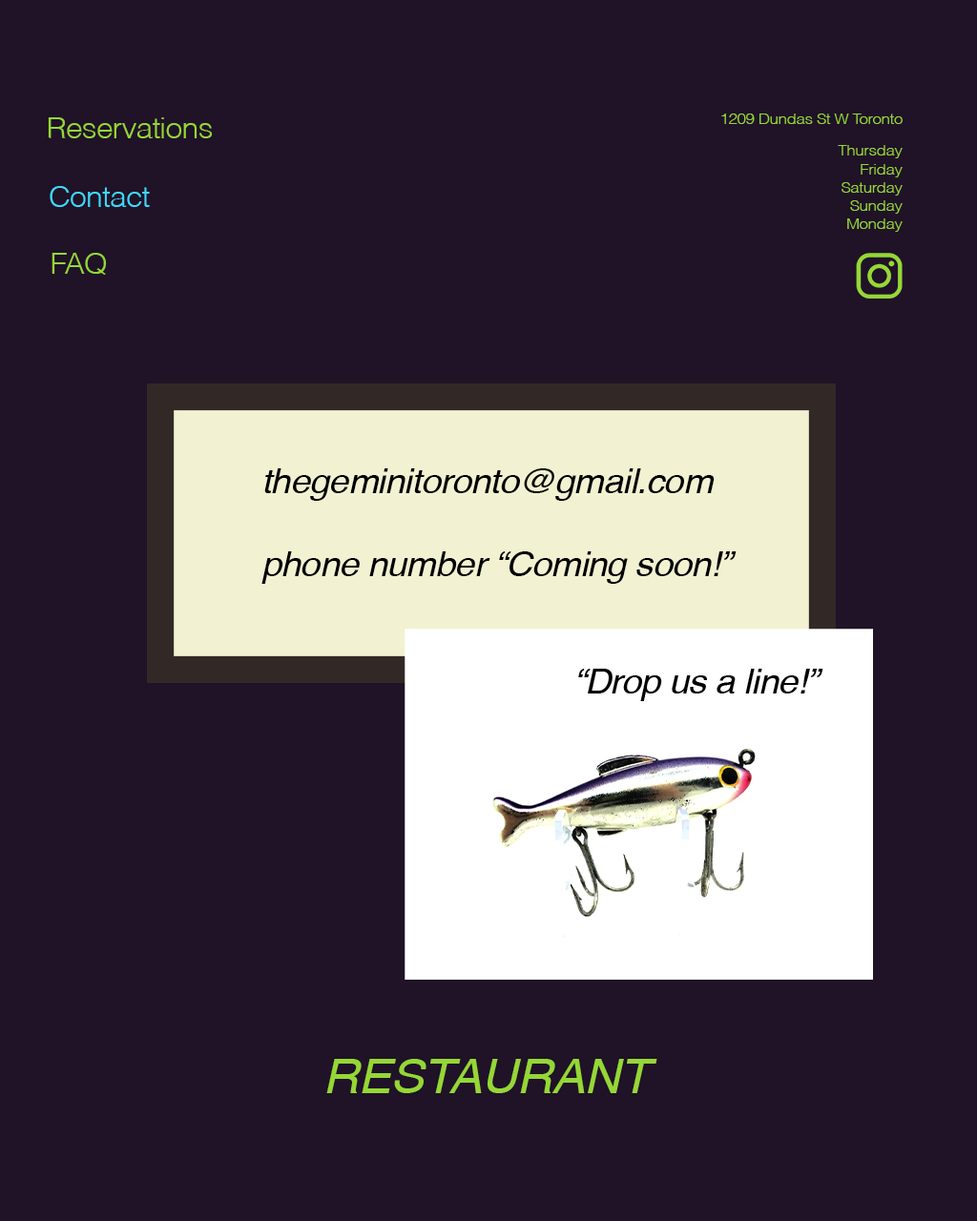
<style>
.page{position:relative;width:977px;height:1221px;background:#201227}
.page>*{position:absolute;margin:0}
.t1{font:15.3px "Helvetica-Light";letter-spacing:-0.02em;color:#95d736;scale:1.05 1}
.t2{font:28.6px "Helvetica-Light";letter-spacing:-0.02em;color:#95d736;scale:1.05 1}
.t3{font:28.6px "Helvetica-Light";letter-spacing:-0.02em;color:#3ed8f9;scale:1.05 1}
.t4{font:34.3px "Helvetica-Oblique";letter-spacing:-0.02em;color:#000000;scale:1.05 1}
.t5{font:47.7px "Helvetica-Oblique";letter-spacing:-0.02em;color:#95d736;scale:1.05 1}
</style>
<div class="page">
<p class="t1" style="left:721px;top:114px;width:181px;height:10px">1209 Dundas St W Toronto</p>
<p class="t2" style="left:48px;top:117px;width:165px;height:21px">Reservations</p>
<p class="t1" style="left:837px;top:145px;width:65px;height:87px;text-align:right">Thursday<br>Friday<br>Saturday<br>Sunday<br>Monday</p>
<p class="t3" style="left:50px;top:186px;width:100px;height:21px">Contact</p>
<p class="t2" style="left:52px;top:253px;width:55px;height:22px">FAQ</p>
<p class="t4" style="left:261px;top:468px;width:475px;height:116px">thegeminitoronto@gmail.com<br><br>phone number “Coming soon!”</p>
<p class="t5" style="left:326px;top:1059px;width:331px;height:34px">RESTAURANT</p>
</div>
